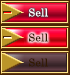
<style>
.page{position:relative;width:72px;height:75px}
.page>*{position:absolute;margin:0}
.t1{font:10.7px "CenturySchoolbook";letter-spacing:0.025em;color:#ffffff}
.t2{font:10.7px "CenturySchoolbook";letter-spacing:0.025em;color:#321a02}
</style>
<div class="page">
<p class="t1" style="left:29px;top:8px;width:19px;height:9px">Sell</p>
<p class="t2" style="left:29px;top:33px;width:19px;height:9px">Sell</p>
<p class="t2" style="left:29px;top:58px;width:19px;height:9px">Sell</p>
</div>
